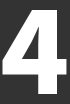
<style>
.page{position:relative;width:70px;height:104px;background:#333333}
.page>*{position:absolute;margin:0}
.t1{font:130.9px "SourceSansPro-Bold";letter-spacing:-0.05em;color:#ffffff}
</style>
<div class="page">
<p class="t1" style="left:2px;top:10px;width:65px;height:84px">4</p>
</div>
